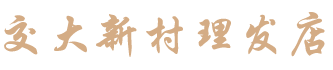
<style>
.page{position:relative;width:333px;height:70px;background:#ffffff}
.page>*{position:absolute;margin:0}
.t1{font:48px "STXingkai-SC-Bold";color:#d4ac85}
</style>
<div class="page">
<p class="t1" style="left:4px;top:12px;width:321px;height:45px">交大新村理发店</p>
</div>
